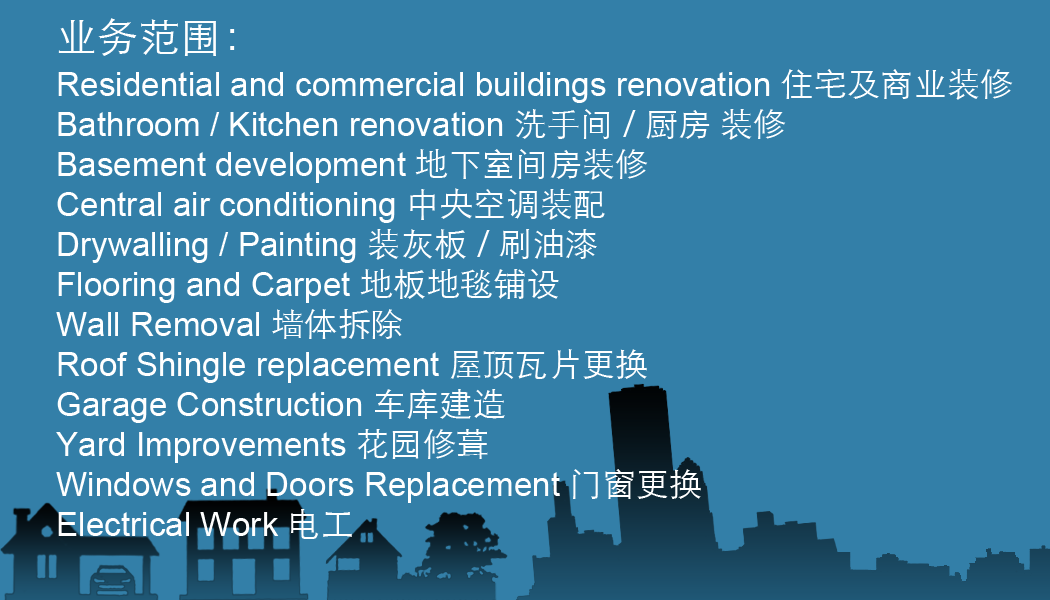
<style>
.page{position:relative;width:1050px;height:600px;background:#337fa8}
.page>*{position:absolute;margin:0}
.t1{font:41.5px "STHeitiSC-Light";color:#ffffff}
.t2{font:33.3px "ArialMT";color:#ffffff}
.t3{font:33.3px "STHeitiSC-Light";color:#ffffff}
</style>
<div class="page">
<p class="t1" style="left:58px;top:18px;width:177px;height:38px">业务范围：</p>
<p class="t2" style="left:56px;top:69px;width:957px;height:470px">Residential and commercial buildings renovation <span class="t3">住宅及商业装修<br></span>Bathroom / Kitchen renovation <span class="t3">洗手间 / 厨房 装修<br></span>Basement development <span class="t3">地下室间房装修<br></span>Central air conditioning <span class="t3">中央空调装配<br></span>Drywalling / Painting <span class="t3">装灰板 / 刷油漆<br></span>Flooring and Carpet <span class="t3">地板地毯铺设<br></span>Wall Removal <span class="t3">墙体拆除<br></span>Roof Shingle replacement <span class="t3">屋顶瓦片更换<br></span>Garage Construction <span class="t3">车库建造<br></span>Yard Improvements <span class="t3">花园修葺<br></span>Windows and Doors Replacement <span class="t3">门窗更换</span> <br>Electrical Work <span class="t3">电工</span></p>
</div>
